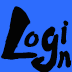
<style>
.page{position:relative;width:72px;height:72px;background:#2d6cfd}
.page>*{position:absolute;margin:0}
.t1{font:72.4px "Ò¶¸ùÓÑÌÆ¿¬¼ò";color:#030303;font-weight:bold}
.t2{font:71.6px "Ò¶¸ùÓÑÌÆ¿¬¼ò";color:#030303;font-weight:bold;scale:0.95 1}
.t3{font:35.1px/26.3px "Ò¶¸ùÓÑÌÆ¿¬¼ò";color:#030303;font-weight:bold;scale:0.84 1}
.t4{font:30.3px "Ò¶¸ùÓÑÌÆ¿¬¼ò";color:#030303;font-weight:bold}
</style>
<div class="page">
<p class="t1" style="left:1px;top:6px;width:37px;height:54px">L</p>
<p class="t2" style="left:31px;top:26px;width:28px;height:47px">g</p>
<p class="t3" style="left:57px;top:20px;width:15px;height:49px;text-align:center">i<br>n</p>
<p class="t4" style="left:24px;top:31px;width:15px;height:16px">o</p>
</div>
